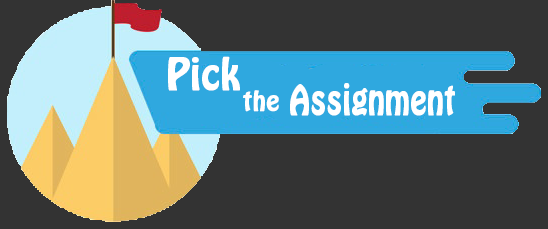
<style>
.page{position:relative;width:548px;height:229px;background:#333333}
.page>*{position:absolute;margin:0}
.t1{font:38.4px "HoboStd";color:#ffffff;font-weight:bold}
.t2{font:37.1px "HoboStd";color:#ffffff;font-weight:bold;scale:0.79 1}
.t3{font:24px "HoboStd";color:#ffffff;font-weight:bold}
</style>
<div class="page">
<p class="t1" style="left:168px;top:56px;width:72px;height:35px">Pick</p>
<p class="t2" style="left:290px;top:83px;width:165px;height:33px">Assignment</p>
<p class="t3" style="left:243px;top:90px;width:36px;height:22px">the</p>
</div>
